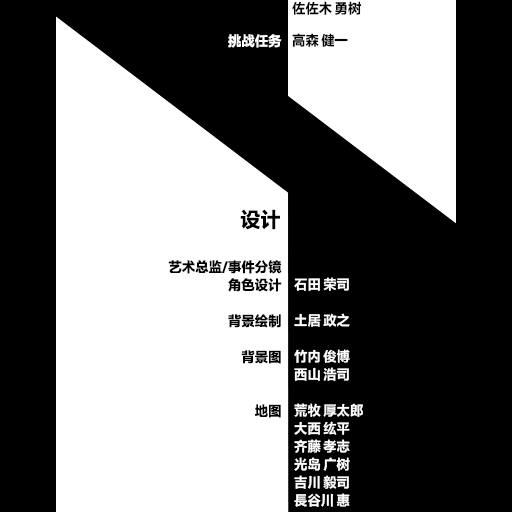
<style>
.page{position:relative;width:512px;height:512px;background:#000000}
.page>*{position:absolute;margin:0}
.t1{font:13.5px/16px "FZLTHProGlobal-Bold";letter-spacing:0.005em;color:#000000}
.t2{font:13.5px "FZLTHProGlobal-Bold";letter-spacing:0.005em;color:#ffffff}
.t3{font:20.2px "FZLTHProGlobal-Bold";letter-spacing:0.005em;color:#000000}
.t4{font:13.5px/18px "FZLTHProGlobal-Bold";letter-spacing:0.005em;color:#000000}
.t5{font:13.5px/18px "FZLTHProGlobal-Bold";letter-spacing:0.005em;color:#ffffff}
</style>
<div class="page">
<p class="t1" style="left:292px;top:1px;width:70px;height:46px">佐佐木 勇树<br><br>高森 健一</p>
<p class="t2" style="left:228px;top:34px;width:54px;height:14px">挑战任务</p>
<p class="t3" style="left:240px;top:209px;width:40px;height:21px">设计</p>
<p class="t4" style="left:168px;top:260px;width:114px;height:158px;text-align:right">艺术总监/事件分镜<br>角色设计<br><br>背景绘制<br><br>背景图<br><br><br>地图</p>
<p class="t5" style="left:294px;top:277px;width:69px;height:230px">石田 荣司<br><br>土居 政之<br><br>竹内 俊博<br>西山 浩司<br><br>荒牧 厚太郎<br>大西 纮平<br>齐藤 孝志<br>光岛 广树<br>吉川 毅司<br>長谷川 惠</p>
</div>
